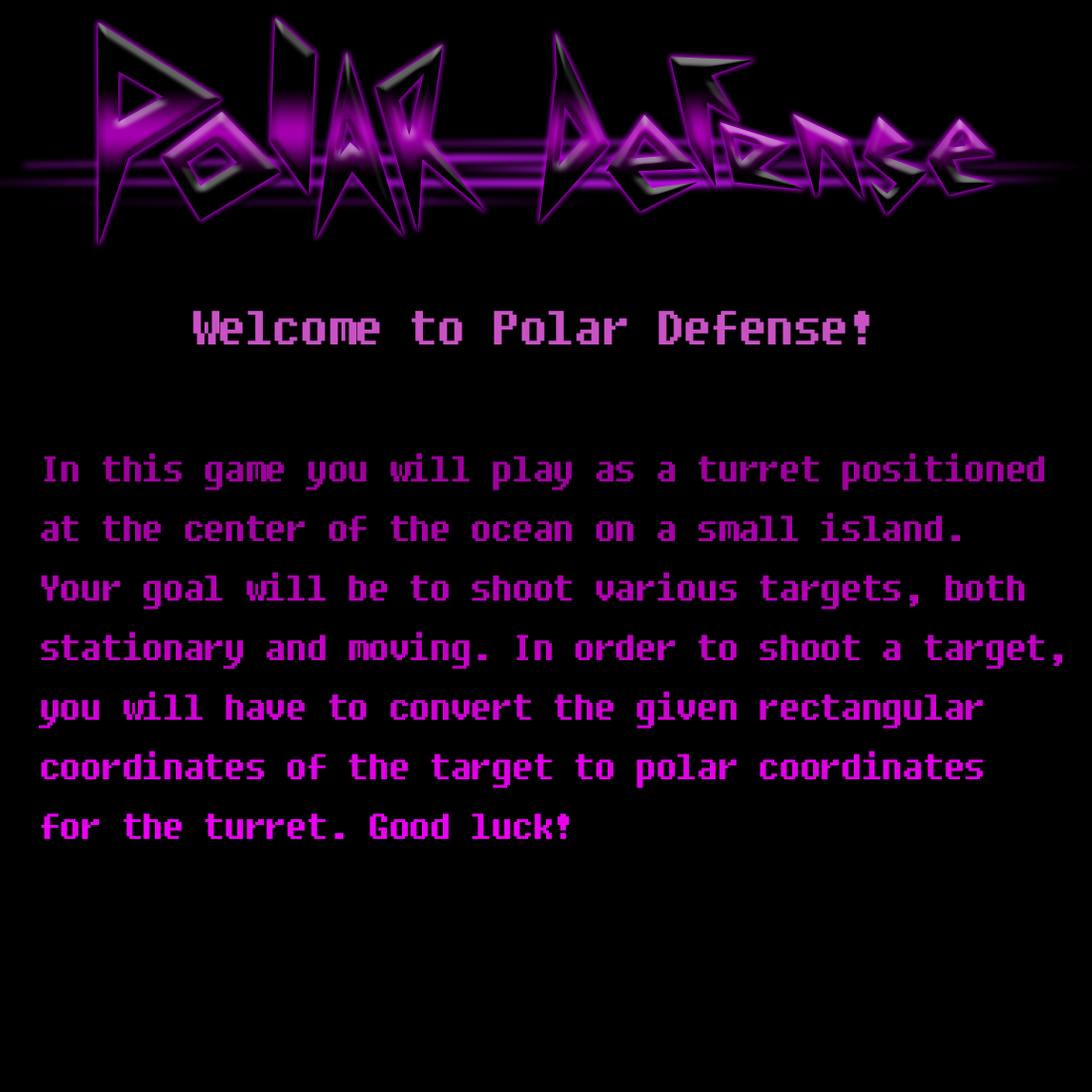
<style>
.page{position:relative;width:1092px;height:1092px;background:#000000}
.page>*{position:absolute;margin:0}
.t1{font:47.7px "Fixedsys";letter-spacing:-0.05em;color:#c852c4}
.t2{font:35.7px/59.6px "Fixedsys";letter-spacing:-0.05em}
</style>
<div class="page">
<p class="t1" style="left:193px;top:311px;width:677px;height:33px">Welcome to Polar Defense!</p>
<p class="t2" style="left:39px;top:453px;width:1023px;height:386px">In this game you will play as a turret positioned<br>at the center of the ocean on a small island. <br>Your goal will be to shoot various targets, both<br>stationary and moving. In order to shoot a target,<br>you will have to convert the given rectangular<br>coordinates of the target to polar coordinates<br>for the turret. Good luck!</p>
</div>
